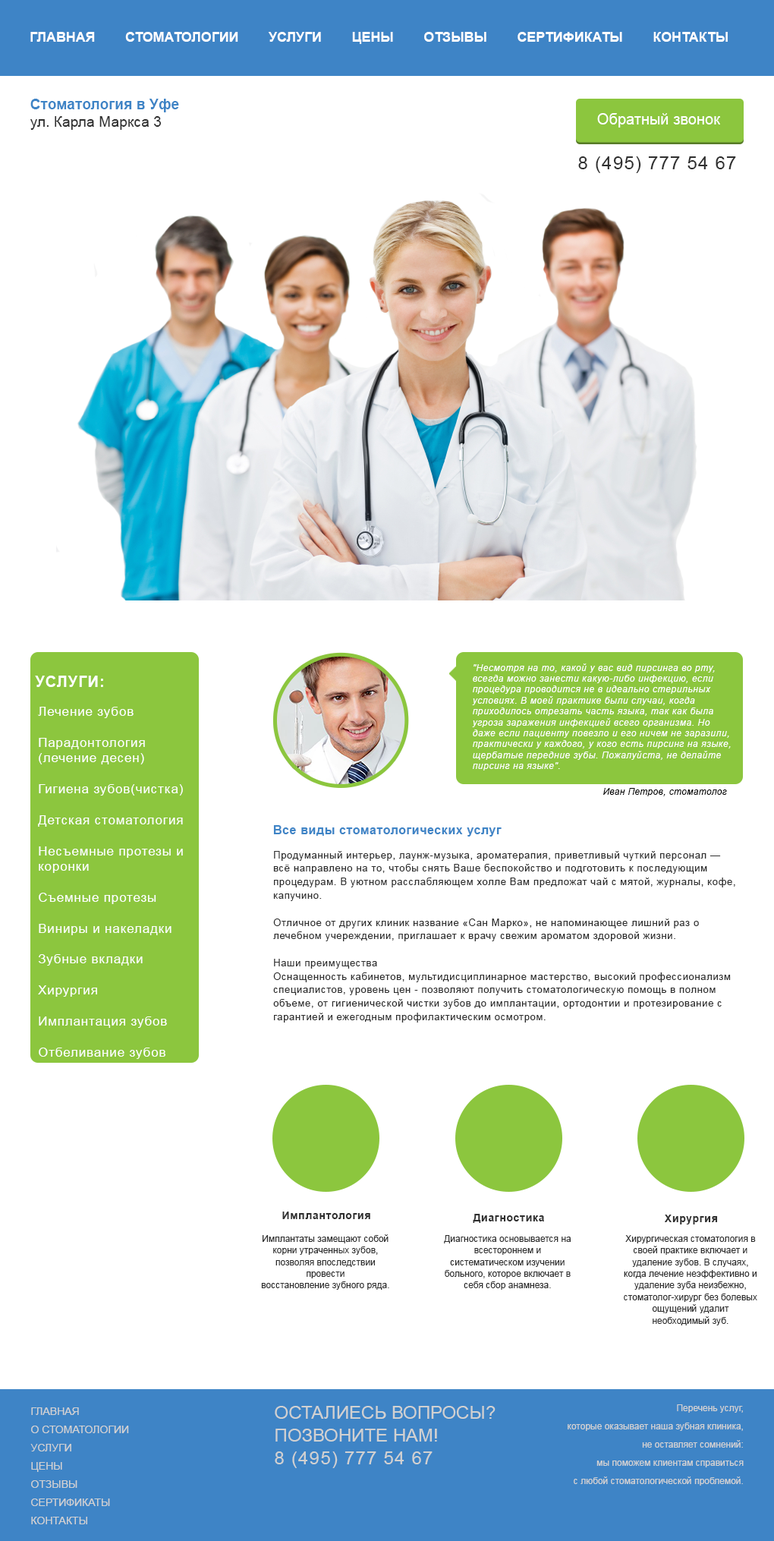
<style>
.page{position:relative;width:774px;height:1541px;background:#ffffff}
.page>*{position:absolute;margin:0}
.t1{font:13.5px "Arial-BoldMT";color:#fffefe}
.t2{font:14.6px "Arial-BoldMT";color:#3e84c6}
.t3{font:14.6px "ArialMT";color:#2f2f2f}
.t4{font:15.2px "ArialMT";color:#ffffff}
.t5{font:18.2px "ArialMT";letter-spacing:0.05em;color:#2f2f2f}
.t6{font:9.1px "Arial-ItalicMT";letter-spacing:0.05em;color:#ffffff}
.t7{font:15.2px "Arial-BoldMT";letter-spacing:0.05em;color:#ffffff}
.t8{font:12.9px "ArialMT";letter-spacing:0.05em;color:#ffffff}
.t9{font:8.8px "Arial-ItalicMT";letter-spacing:0.05em;color:#000000}
.t10{font:9.9px/13.5px "ArialMT";letter-spacing:0.05em;color:#2f2f2f}
.t11{font:11.9px "Arial-BoldMT";letter-spacing:0.05em;color:#3e84c6}
.t12{font:10.6px "Arial-BoldMT";letter-spacing:0.05em;color:#2f2f2f}
.t13{font:9.1px/11.7px "ArialMT";color:#2f2f2f}
.t14{font:10.6px/18.2px "ArialMT";color:#d2d2d2}
.t15{font:18.2px/22.8px "ArialMT";color:#d1d1d1}
.t16{font:18.2px/22.8px "ArialMT";letter-spacing:0.05em;color:#d1d1d1}
.t17{font:9.1px/18.2px "ArialMT";color:#d2d2d2}
</style>
<div class="page">
<p class="t1" style="left:30px;top:32px;width:698px;height:12px">ГЛАВНАЯ        СТОМАТОЛОГИИ        УСЛУГИ        ЦЕНЫ        ОТЗЫВЫ        СЕРТИФИКАТЫ        КОНТАКТЫ</p>
<p class="t2" style="left:30px;top:99px;width:149px;height:31px">Стоматология в Уфе<br><span class="t3">ул. Карла Маркса 3</span></p>
<p class="t4" style="left:597px;top:113px;width:123px;height:14px">Обратный звонок</p>
<p class="t5" style="left:578px;top:156px;width:158px;height:17px">8 (495) 777 54 67</p>
<p class="t6" style="left:472px;top:663px;width:259px;height:107px">"Несмотря на то, какой у вас вид пирсинга во рту, всегда можно занести какую-либо инфекцию, если процедура проводится не в идеально стерильных условиях. В моей практике были случаи, когда приходилось отрезать часть языка, так как была угроза заражения инфекцией всего организма. Но даже если пациенту повезло и его ничем не заразили, практически у каждого, у кого есть пирсинг на языке, щербатые передние зубы. Пожалуйста, не делайте пирсинг на языке".</p>
<p class="t7" style="left:35px;top:675px;width:68px;height:12px">УСЛУГИ:</p>
<p class="t8" style="left:38px;top:707px;width:145px;height:352px">Лечение зубов<br><br>Парадонтология<br>(лечение десен)<br><br>Гигиена зубов(чистка)<br><br>Детская стоматология<br><br>Несъемные протезы и<br>коронки<br><br>Съемные протезы<br><br>Виниры и накеладки<br><br>Зубные вкладки<br><br>Хирургия<br><br>Имплантация зубов<br><br>Отбеливание зубов</p>
<p class="t9" style="left:603px;top:788px;width:124px;height:8px">Иван Петров, стоматолог</p>
<p class="t10" style="left:273px;top:825px;width:462px;height:197px"><span class="t11">Все виды стоматологических услуг<br><br></span>Продуманный интерьер, лаунж-музыка, ароматерапия, приветливый чуткий персонал — всё направлено на то, чтобы снять Ваше беспокойство и подготовить к последующим процедурам. В уютном расслабляющем холле Вам предложат чай с мятой, журналы, кофе, капучино.<br><br>Отличное от других клиник название «Сан Марко», не напоминающее лишний раз о лечебном учереждении, приглашает к врачу свежим ароматом здоровой жизни.<br><br>Наши преимущества<br>Оснащенность кабинетов, мультидисциплинарное мастерство, высокий профессионализм специалистов, уровень цен - позволяют получить стоматологическую помощь в полном объеме, от гигиенической чистки зубов до имплантации, ортодонтии и протезирование с гарантией и ежегодным профилактическим осмотром.</p>
<p class="t12" style="left:282px;top:1211px;width:88px;height:8px">Имплантология</p>
<p class="t12" style="left:473px;top:1213px;width:71px;height:10px">Диагностика</p>
<p class="t12" style="left:665px;top:1214px;width:53px;height:10px">Хирургия</p>
<p class="t13" style="left:261px;top:1234px;width:128px;height:55px;text-align:center">Имплантаты замещают собой <br>корни утраченных зубов, позволяя впоследствии провести <br>восстановление зубного ряда.</p>
<p class="t13" style="left:444px;top:1235px;width:127px;height:54px;text-align:center">Диагностика основывается на всестороннем и систематическом изучении больного, которое включает в себя сбор анамнеза.</p>
<p class="t13" style="left:624px;top:1235px;width:133px;height:90px;text-align:center">Хирургическая стоматология в своей практике включает и удаление зубов. В случаях, когда лечение неэффективно и удаление зуба неизбежно, стоматолог-хирург без болевых ощущений удалит необходимый зуб.</p>
<p class="t14" style="left:30px;top:1407px;width:99px;height:117px">ГЛАВНАЯ<br>О СТОМАТОЛОГИИ<br>УСЛУГИ<br>ЦЕНЫ<br>ОТЗЫВЫ<br>СЕРТИФИКАТЫ<br>КОНТАКТЫ</p>
<p class="t15" style="left:275px;top:1405px;width:221px;height:63px">ОСТАЛИЕСЬ ВОПРОСЫ?<br>ПОЗВОНИТЕ НАМ!<br><span class="t16">8 (495) 777 54 67</span></p>
<p class="t17" style="left:568px;top:1404px;width:176px;height:81px;text-align:right">Перечень услуг,<br>которые оказывает наша зубная клиника,<br>не оставляет сомнений:<br>мы поможем клиентам справиться<br>с любой стоматологической проблемой.</p>
</div>
